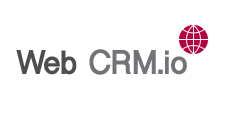
<style>
.page{position:relative;width:233px;height:113px;background:#ffffff}
.page>*{position:absolute;margin:0}
.t1{font:34.7px "MyanmarSangamMN-Bold";letter-spacing:-0.02em;color:#717376}
.t2{font:34.7px "MyanmarSangamMN-Bold";letter-spacing:-0.02em;color:#4e4e4e}
</style>
<div class="page">
<p class="t1" style="left:16px;top:49px;width:171px;height:26px"><span class="t2">Web</span> CRM.io</p>
</div>
